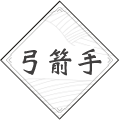
<style>
.page{position:relative;width:120px;height:120px;background:#ffffff}
.page>*{position:absolute;margin:0}
.t1{font:30px "WeibeiTC-Bold";color:#403e3e}
</style>
<div class="page">
<p class="t1" style="left:22px;top:48px;width:80px;height:28px">弓箭手</p>
</div>
